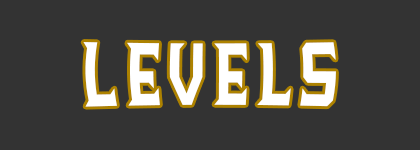
<style>
.page{position:relative;width:420px;height:150px;background:#333333}
.page>*{position:absolute;margin:0}
.t1{font:93.8px "Lorde-Havana";letter-spacing:0.1em;color:#ffffff;scale:0.75 1}
</style>
<div class="page">
<p class="t1" style="left:83px;top:42px;width:253px;height:65px">Levels</p>
</div>
